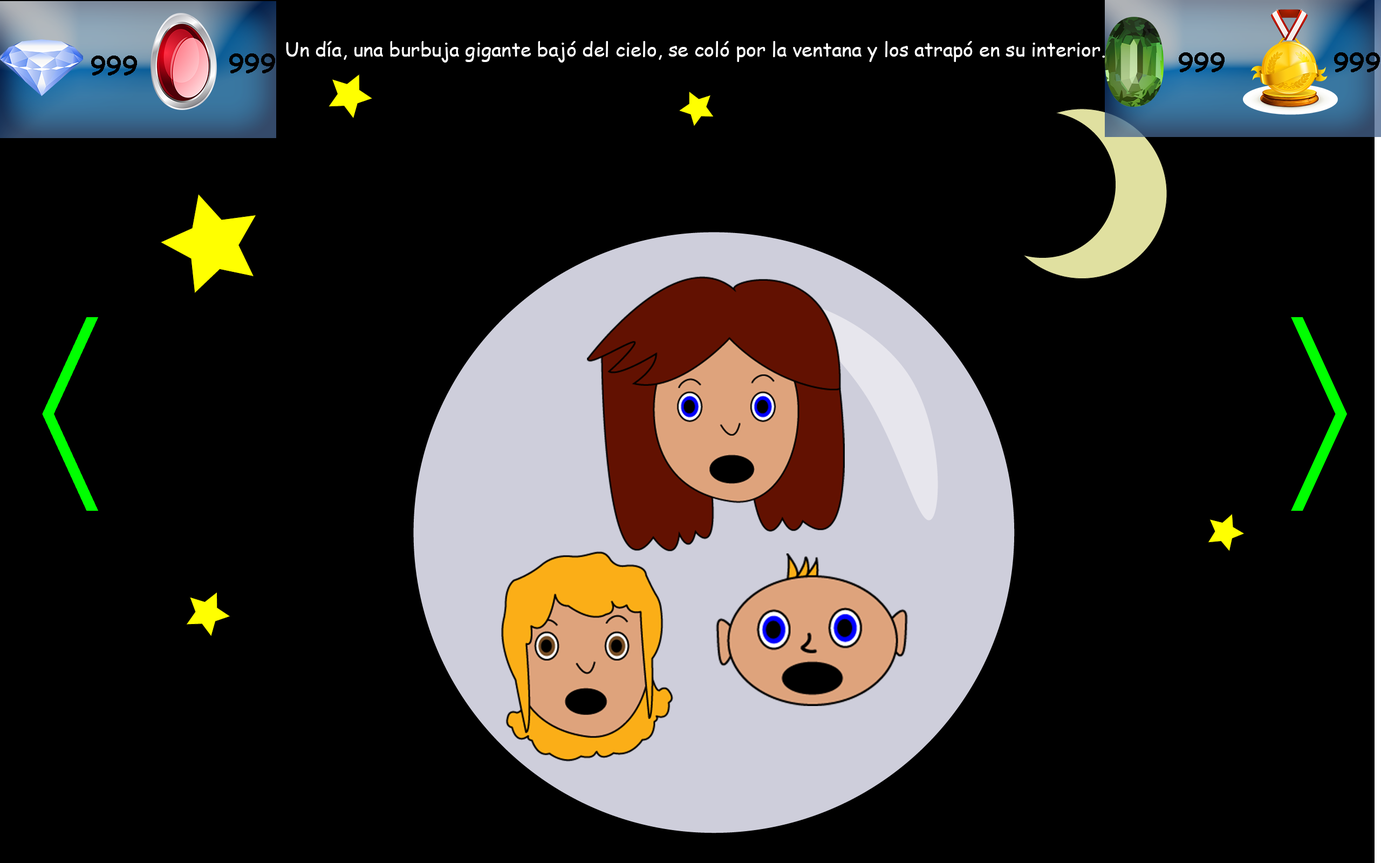
<style>
.page{position:relative;width:1381px;height:863px;background:#000000}
.page>*{position:absolute;margin:0}
.t1{font:19.4px "ComicSansMS";color:#ffffff}
.t2{font:25.9px "ComicSansMS-Bold";color:#010101}
.t3{font:25.9px "ComicSansMS-Bold";color:#000000}
</style>
<div class="page">
<p class="t1" style="left:286px;top:41px;width:819px;height:22px">Un día, una burbuja gigante bajó del cielo, se coló por la ventana y los atrapó en su interior.</p>
<p class="t2" style="left:229px;top:53px;width:46px;height:20px">999</p>
<p class="t2" style="left:1179px;top:52px;width:46px;height:20px">999</p>
<p class="t3" style="left:1334px;top:52px;width:46px;height:20px">999</p>
<p class="t3" style="left:91px;top:56px;width:46px;height:20px">999</p>
</div>
